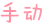
<style>
.page{position:relative;width:42px;height:24px;background:#ffffff}
.page>*{position:absolute;margin:0}
.t1{font:26px "¢è?";color:#ff93a5}
</style>
<div class="page">
<p class="t1" style="left:0px;top:2px;width:42px;height:21px">手动</p>
</div>
